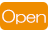
<style>
.page{position:relative;width:48px;height:32px;background:#ef8d00}
.page>*{position:absolute;margin:0}
.t1{font:16px "HGMaruGothicMPRO";color:#ffffff}
</style>
<div class="page">
<p class="t1" style="left:2px;top:9px;width:44px;height:16px">Open</p>
</div>
